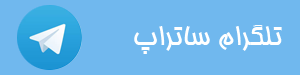
<style>
.page{position:relative;width:300px;height:75px;background:#70b8ee}
.page>*{position:absolute;margin:0}
.t1{font:30px "BHoma";color:#ffffff}
</style>
<div class="page">
<p class="t1" style="left:134px;top:25px;width:148px;height:29px">تلگرام ساتراپ</p>
</div>
